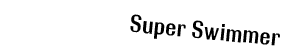
<style>
.page{position:relative;width:283px;height:56px;background:#ffffff}
.page>*{position:absolute;margin:0}
.t1{font:24px "RolloutPlain";color:#000000}
</style>
<div class="page">
<p class="t1" style="left:130px;top:14px;width:150px;height:32px;rotate:6deg">Super Swimmer</p>
</div>
